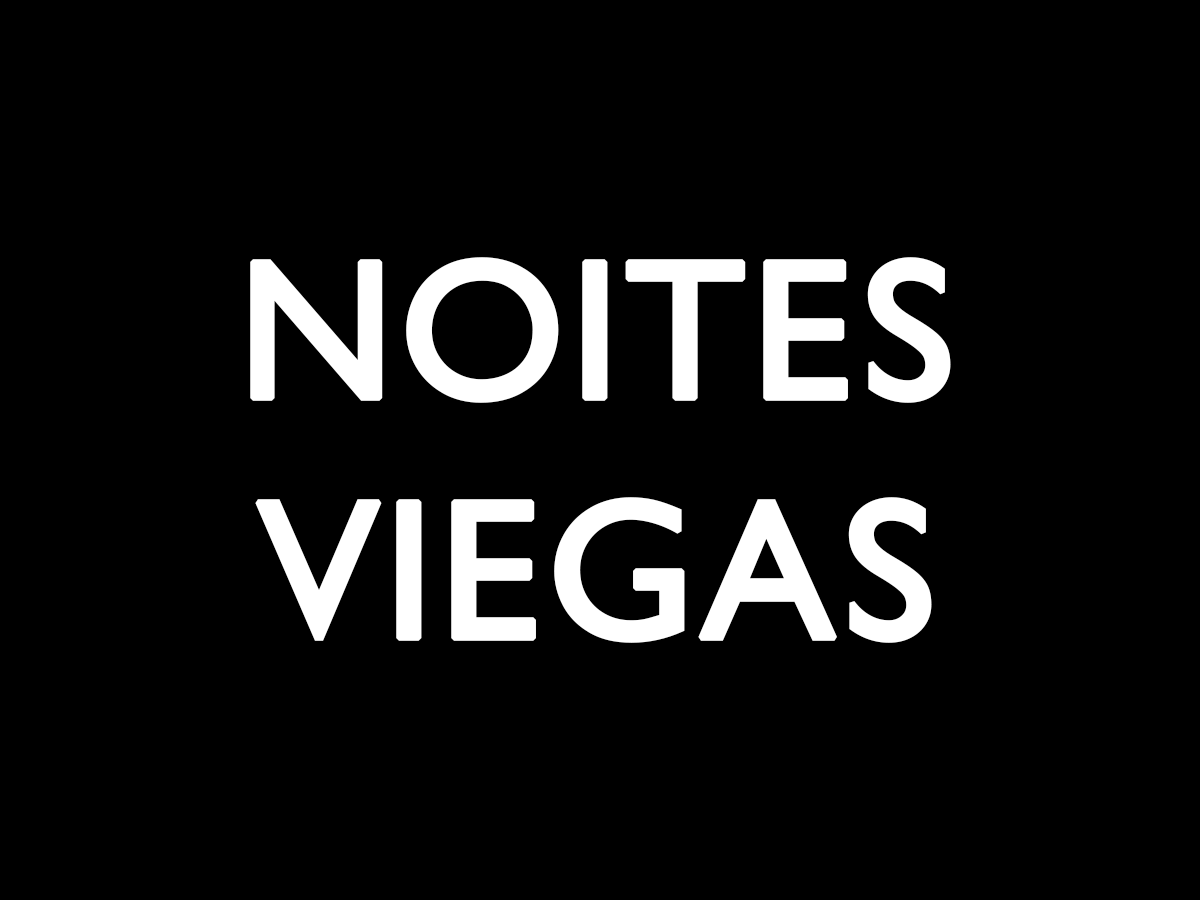
<style>
.page{position:relative;width:1200px;height:900px;background:#000000}
.page>*{position:absolute;margin:0}
.t1{font:200px "GillSansNova";color:#ffffff;font-weight:bold}
</style>
<div class="page">
<p class="t1" style="left:250px;top:257px;width:701px;height:386px;text-align:center">NOITES<br>VIEGAS</p>
</div>
